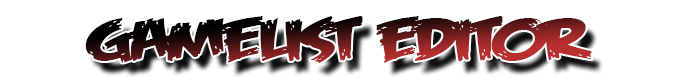
<style>
.page{position:relative;width:680px;height:80px;background:#ffffff}
.page>*{position:absolute;margin:0}
.t1{font:60px "FeastofFleshBB";letter-spacing:-0.03em;scale:1.5 1}
</style>
<div class="page">
<p class="t1" style="left:85px;top:16px;width:507px;height:47px">gamelist editor</p>
</div>
